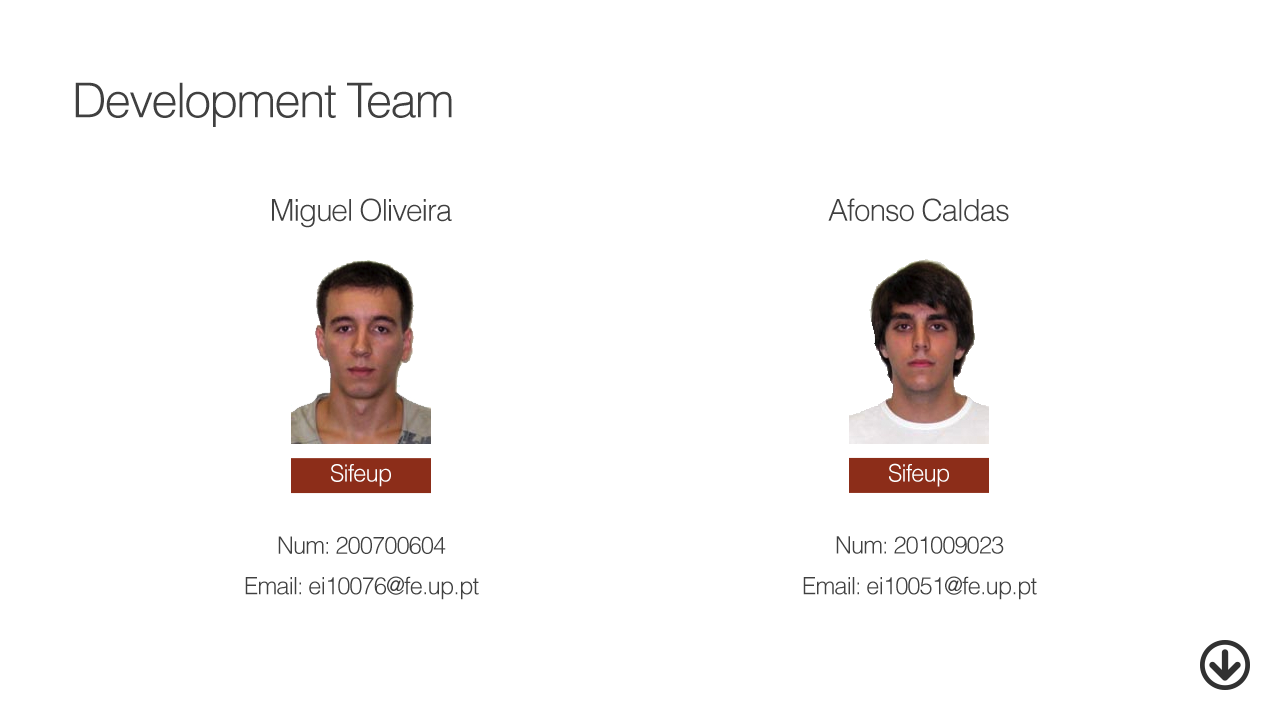
<style>
.page{position:relative;width:1280px;height:720px;background:#ffffff}
.page>*{position:absolute;margin:0}
.t1{font:48px "Helvetica-Light";letter-spacing:-0.04em;color:#404040}
.t2{font:30.3px "Helvetica-Light";letter-spacing:-0.04em;color:#404040}
.t3{font:23.9px "Helvetica-Light";letter-spacing:-0.04em;color:#ffffff}
.t4{font:24px/20.3px "Helvetica-Light";letter-spacing:-0.04em;color:#404040}
</style>
<div class="page">
<p class="t1" style="left:75px;top:82px;width:377px;height:45px">Development Team</p>
<p class="t2" style="left:272px;top:198px;width:180px;height:30px">Miguel Oliveira</p>
<p class="t2" style="left:828px;top:198px;width:181px;height:24px">Afonso Caldas</p>
<p class="t3" style="left:331px;top:464px;width:60px;height:23px">Sifeup</p>
<p class="t3" style="left:889px;top:463px;width:60px;height:24px">Sifeup</p>
<p class="t4" style="left:245px;top:536px;width:234px;height:64px;text-align:center">Num: 200700604<br><br>Email: ei10076@fe.up.pt</p>
<p class="t4" style="left:803px;top:536px;width:234px;height:64px;text-align:center">Num: 201009023<br><br>Email: ei10051@fe.up.pt</p>
</div>
